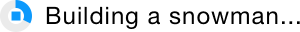
<style>
.page{position:relative;width:300px;height:32px;background:#ffffff}
.page>*{position:absolute;margin:0}
.t1{font:24px "HelveticaNeue";letter-spacing:0.04em;color:#000000}
</style>
<div class="page">
<p class="t1" style="left:46px;top:6px;width:254px;height:23px">Building a snowman...</p>
</div>
